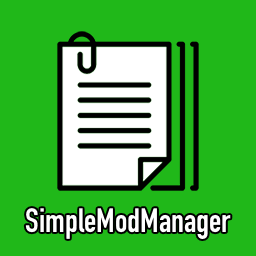
<style>
.page{position:relative;width:256px;height:256px;background:#20b819}
.page>*{position:absolute;margin:0}
.t1{font:33.3px "DINCondensed-Bold";color:#ffffff}
</style>
<div class="page">
<p class="t1" style="left:25px;top:208px;width:206px;height:31px">SimpleModManager</p>
</div>
